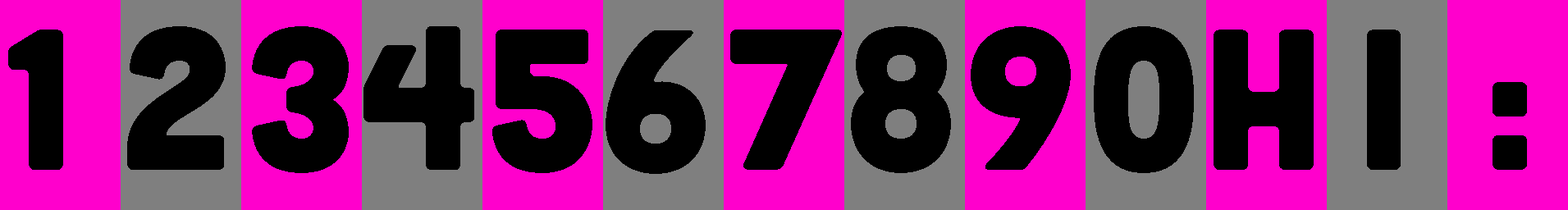
<style>
.page{position:relative;width:1568px;height:210px;background:#ff00cc}
.page>*{position:absolute;margin:0}
.t1{font:200.1px "Cubano-Regular";color:#000000}
</style>
<div class="page">
<p class="t1" style="left:8px;top:30px;width:55px;height:140px">1</p>
<p class="t1" style="left:127px;top:26px;width:99px;height:144px">2</p>
<p class="t1" style="left:252px;top:26px;width:97px;height:147px">3</p>
<p class="t1" style="left:363px;top:26px;width:111px;height:144px">4</p>
<p class="t1" style="left:492px;top:30px;width:100px;height:143px">5</p>
<p class="t1" style="left:730px;top:30px;width:112px;height:140px">7</p>
<p class="t1" style="left:851px;top:26px;width:100px;height:147px">8</p>
<p class="t1" style="left:971px;top:26px;width:100px;height:144px">9</p>
<p class="t1" style="left:1094px;top:26px;width:100px;height:147px">0</p>
<p class="t1" style="left:1214px;top:30px;width:100px;height:140px">h</p>
<p class="t1" style="left:1367px;top:30px;width:34px;height:140px">i</p>
<p class="t1" style="left:606px;top:30px;width:100px;height:144px">6</p>
<p class="t1" style="left:1493px;top:82px;width:34px;height:88px">:</p>
</div>
